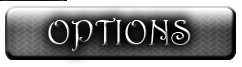
<style>
.page{position:relative;width:242px;height:67px}
.page>*{position:absolute;margin:0}
.t1{font:36px "Harrington"}
</style>
<div class="page">
<p class="t1" style="left:48px;top:18px;width:143px;height:33px">OPTIONS</p>
</div>
